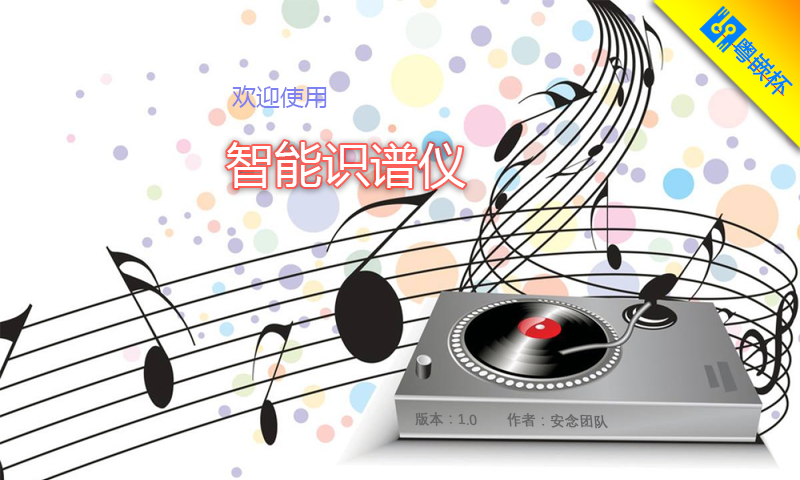
<style>
.page{position:relative;width:800px;height:480px;background:#ffffff}
.page>*{position:absolute;margin:0}
.t1{font:23.1px "MicrosoftYaHei";color:#0080ff;font-weight:bold}
.t2{font:24px "MicrosoftYaHei";color:#7e81f0}
.t3{font:48px "MicrosoftYaHei";color:#ffffff}
.t4{font:14.5px "DengXian-Regular";color:#666666;font-weight:bold;font-style:italic}
</style>
<div class="page">
<p class="t1" style="left:733px;top:38px;width:60px;height:57px;rotate:45deg">粤嵌杯</p>
<p class="t2" style="left:232px;top:85px;width:95px;height:23px">欢迎使用</p>
<p class="t3" style="left:226px;top:141px;width:240px;height:48px">智能识谱仪</p>
<p class="t4" style="left:415px;top:412px;width:193px;height:17px;rotate:1deg">版本：1.0       作者：安念团队</p>
</div>
